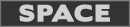
<style>
.page{position:relative;width:130px;height:27px;background:#333333}
.page>*{position:absolute;margin:0}
.t1{font:22px "BorisBlackBloxx";letter-spacing:0.1em;color:#d2d0d0}
</style>
<div class="page">
<p class="t1" style="left:19px;top:4px;width:91px;height:18px">SPACE</p>
</div>
